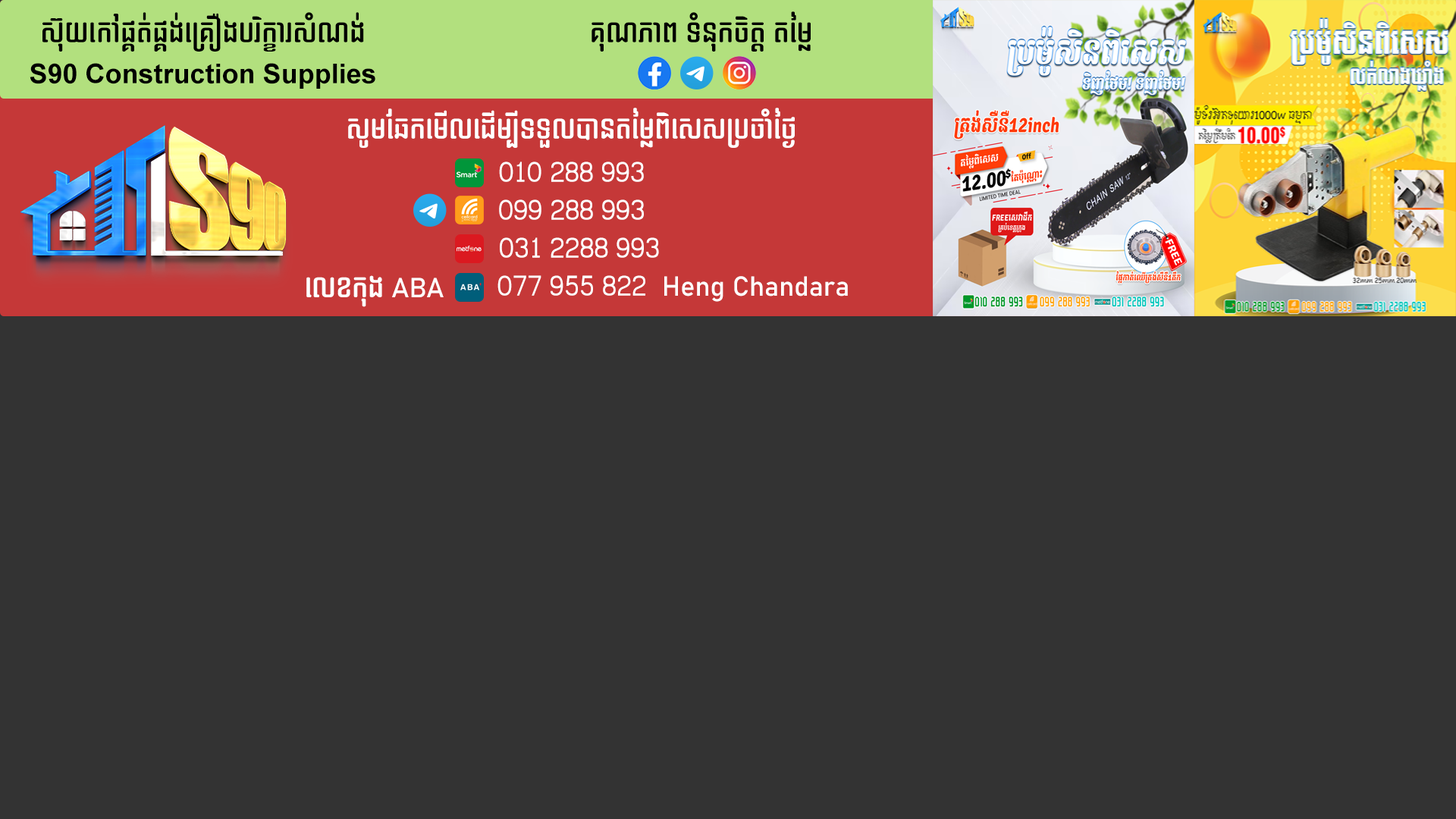
<style>
.page{position:relative;width:1456px;height:819px;background:#333333}
.page>*{position:absolute;margin:0}
.t1{font:27.3px/40.9px "Dangrek";color:#000000}
.t2{font:27.3px/40.9px "Arial-BoldMT";color:#000000}
.t3{font:27.3px "Dangrek";color:#000000}
.t4{font:27.3px "Dangrek";color:#ffffff}
.t5{font:27.3px/37.9px "Dangrek";color:#ffffff}
.t6{font:27.3px "Bahnschrift";color:#ffffff}
</style>
<div class="page">
<p class="t1" style="left:30px;top:12px;width:345px;height:77px;text-align:center">ស៊ុយកៅផ្គត់ផ្គង់គ្រឿងបរិក្ខារសំណង់<br><span class="t2">S90 Construction Supplies</span></p>
<p class="t3" style="left:591px;top:11px;width:220px;height:41px">គុណភាព ទំនុកចិត្ដ តម្លៃ</p>
<p class="t4" style="left:348px;top:108px;width:447px;height:40px">សូមឆែកមើលដើម្បីទទួលបានតម្លៃពិសេសប្រចាំថ្ងៃ</p>
<p class="t5" style="left:497px;top:162px;width:162px;height:134px;text-align:center">010 288 993<br>099 288 993<br>  031 2288 993<br>077 955 822</p>
<p class="t4" style="left:306px;top:275px;width:138px;height:32px">លេខកុង <span class="t6">ABA</span></p>
<p class="t6" style="left:664px;top:276px;width:184px;height:26px">Heng Chandara</p>
</div>
